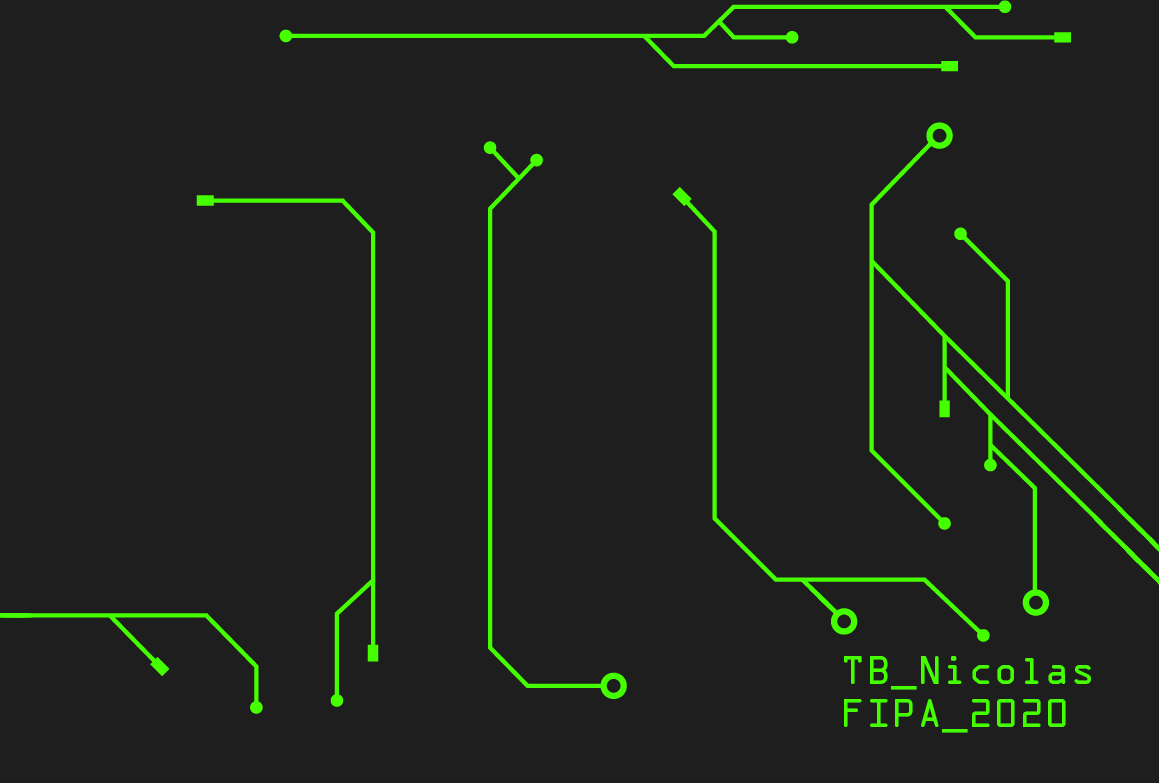
<style>
.page{position:relative;width:1159px;height:783px;background:#1e1e1e}
.page>*{position:absolute;margin:0}
.t1{font:35.4px "OCRAStd";color:#45ff00}
</style>
<div class="page">
<p class="t1" style="left:844px;top:656px;width:247px;height:77px">TB_Nicolas<br>FIPA_2020</p>
</div>
